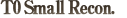
<style>
.page{position:relative;width:127px;height:18px;background:#ffffff}
.page>*{position:absolute;margin:0}
.t1{font:18px "RyuminPro-ExBold";letter-spacing:-0.08em;color:#4a3f32;font-weight:bold;scale:0.9 1}
</style>
<div class="page">
<p class="t1" style="left:0px;top:0px;width:115px;height:15px">T0 Small Recon.</p>
</div>
